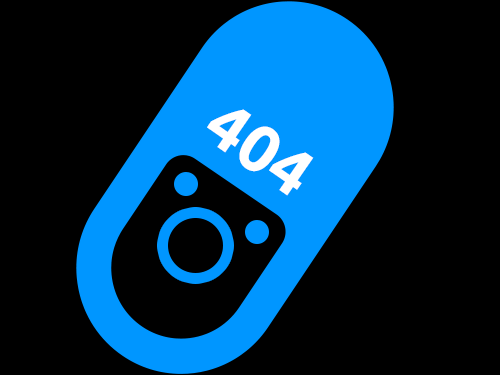
<style>
.page{position:relative;width:500px;height:375px;background:#000000}
.page>*{position:absolute;margin:0}
.t1{font:66px "Ubuntu-Bold";color:#ffffff}
</style>
<div class="page">
<p class="t1" style="left:207px;top:109px;width:107px;height:87px;rotate:35deg">404</p>
</div>
